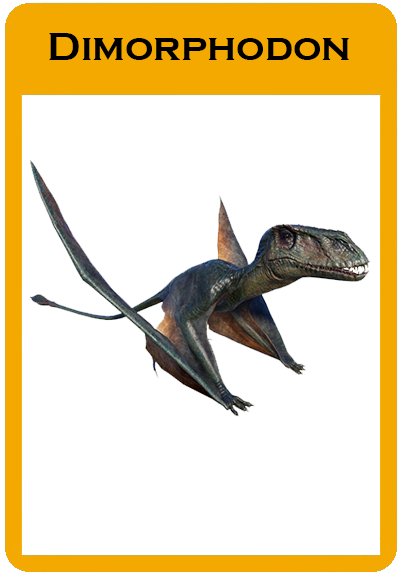
<style>
.page{position:relative;width:400px;height:575px;background:#ffffff}
.page>*{position:absolute;margin:0}
.t1{font:40px "CopperplateGothic-Bold";color:#000000}
</style>
<div class="page">
<p class="t1" style="left:49px;top:33px;width:300px;height:27px">Dimorphodon</p>
</div>
